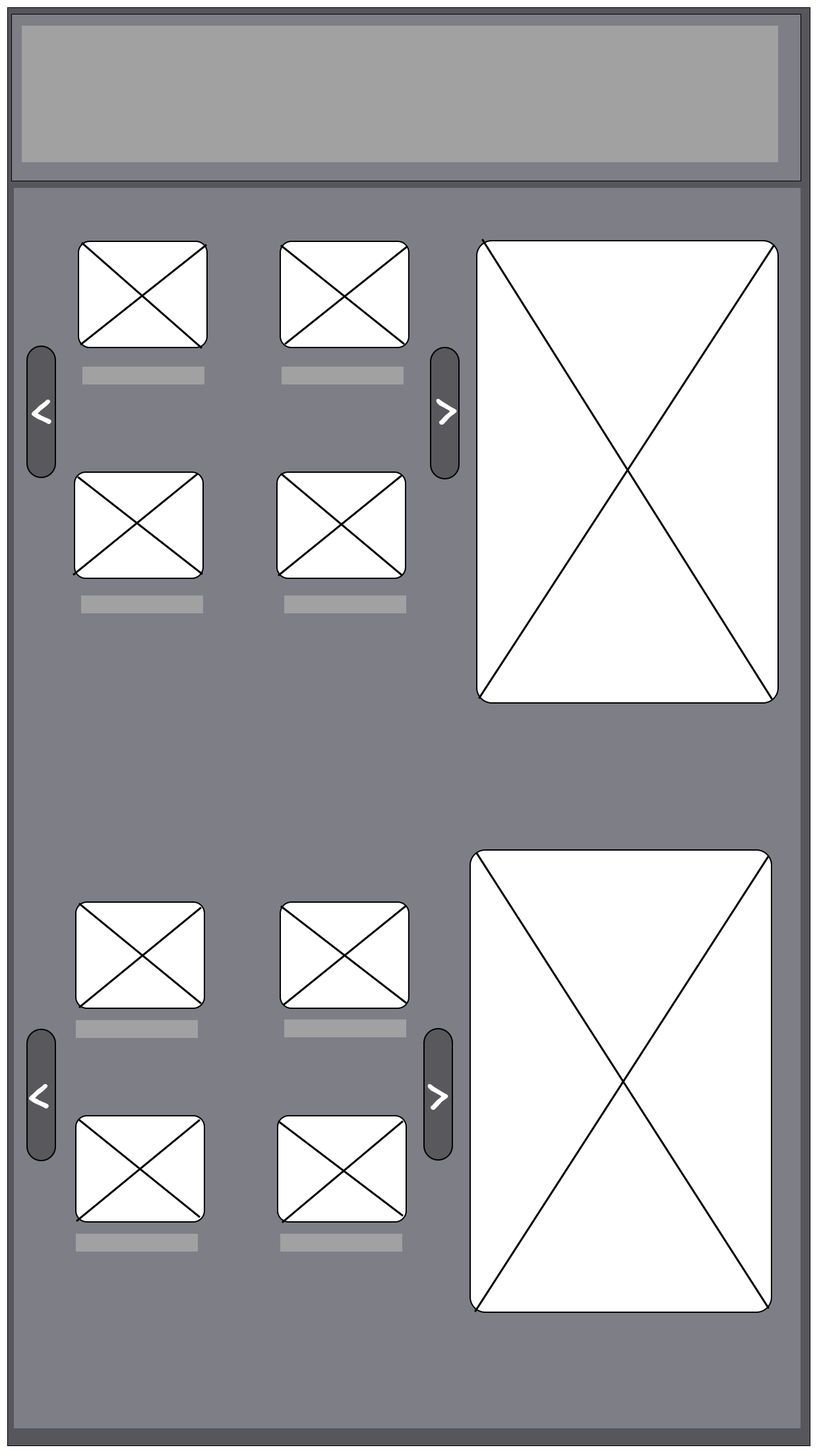
<style>
.page{position:relative;width:819px;height:1456px;background:#7e7e86}
.page>*{position:absolute;margin:0}
.t1{font:44.2px "SegoeScript-Bold";letter-spacing:0.025em;color:#ffffff}
</style>
<div class="page">
<p class="t1" style="left:32px;top:400px;width:19px;height:24px">&lt;</p>
<p class="t1" style="left:436px;top:399px;width:21px;height:26px">&gt;</p>
<p class="t1" style="left:29px;top:1084px;width:20px;height:24px">&lt;</p>
<p class="t1" style="left:427px;top:1084px;width:21px;height:26px">&gt;</p>
</div>
